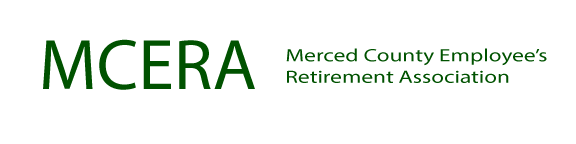
<style>
.page{position:relative;width:576px;height:144px;background:#ffffff}
.page>*{position:absolute;margin:0}
.t1{font:72px "MyriadPro-Regular";color:#005200}
.t2{font:17.9px "MyriadPro-Regular";color:#005200;scale:1.3 1}
</style>
<div class="page">
<p class="t1" style="left:43px;top:39px;width:212px;height:51px">MCERA</p>
<p class="t2" style="left:286px;top:48px;width:261px;height:35px">Merced County Employee’s <br>Retirement Association</p>
</div>
